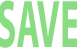
<style>
.page{position:relative;width:77px;height:50px;background:#ffffff}
.page>*{position:absolute;margin:0}
.t1{font:68px "MyriadPro-Bold";color:#89dc82;scale:0.52 1}
</style>
<div class="page">
<p class="t1" style="left:0px;top:0px;width:78px;height:48px">SAVE</p>
</div>
